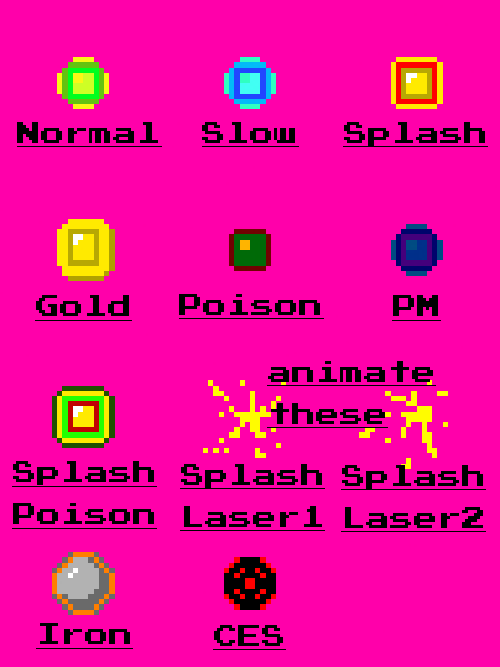
<style>
.page{position:relative;width:500px;height:667px;background:#ff00aa}
.page>*{position:absolute;margin:0}
.t1{font:24px "PressStart2P";color:#000000;text-decoration:underline}
</style>
<div class="page">
<p class="t1" style="left:17px;top:122px;width:145px;height:25px">Normal</p>
<p class="t1" style="left:202px;top:122px;width:97px;height:25px">Slow</p>
<p class="t1" style="left:343px;top:122px;width:145px;height:25px">Splash</p>
<p class="t1" style="left:179px;top:294px;width:145px;height:25px">Poison</p>
<p class="t1" style="left:35px;top:295px;width:97px;height:26px">Gold</p>
<p class="t1" style="left:392px;top:295px;width:49px;height:26px">PM</p>
<p class="t1" style="left:267px;top:361px;width:169px;height:67px">animate<br>these</p>
<p class="t1" style="left:12px;top:461px;width:145px;height:68px">Splash<br>Poison</p>
<p class="t1" style="left:180px;top:464px;width:145px;height:67px">Splash<br>Laser1</p>
<p class="t1" style="left:341px;top:465px;width:145px;height:67px">Splash<br>Laser2</p>
<p class="t1" style="left:36px;top:623px;width:97px;height:26px">Iron</p>
</div>
